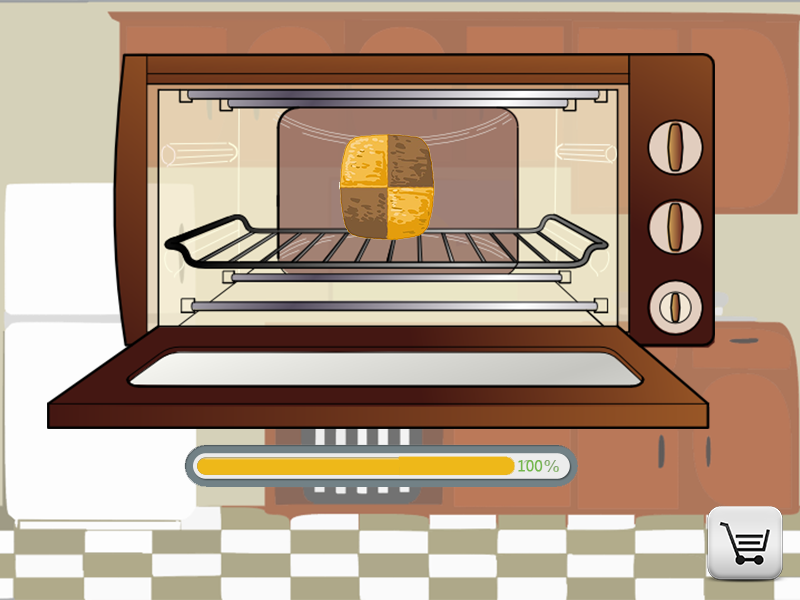
<style>
.page{position:relative;width:800px;height:600px}
.page>*{position:absolute;margin:0}
.t1{font:14px "MicrosoftJhengHeiRegular";letter-spacing:0.009em;color:#74b74c;font-weight:bold}
</style>
<div class="page">
<p class="t1" style="left:518px;top:460px;width:25px;height:12px">100</p>
</div>
